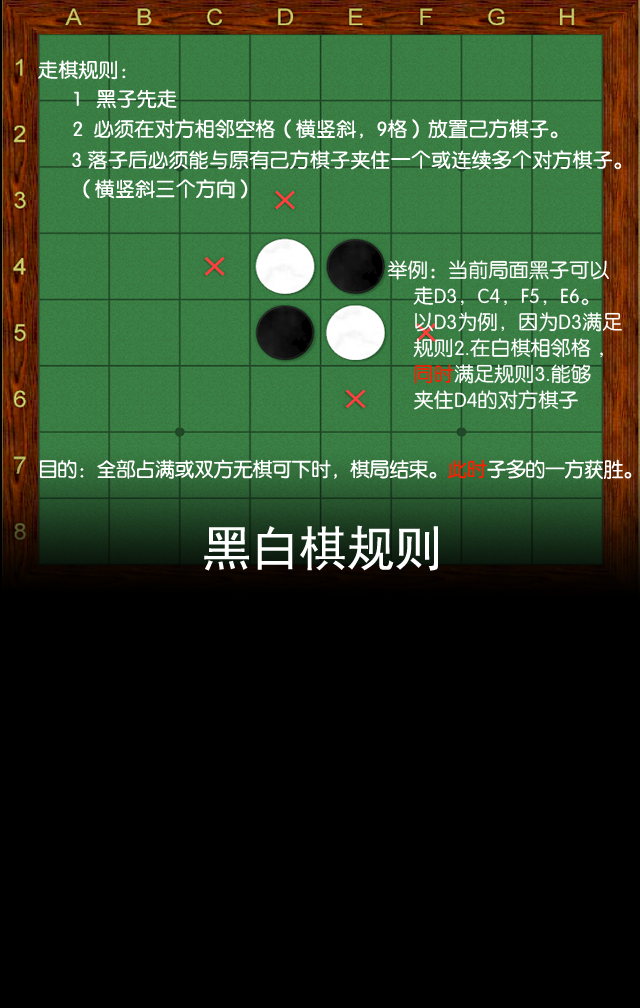
<style>
.page{position:relative;width:640px;height:1008px;background:#000000}
.page>*{position:absolute;margin:0}
.t1{font:20px "FZY3K--GBK1-0";letter-spacing:0.01em;color:#ffffff}
.t2{font:20px/26px "FZY3K--GBK1-0";letter-spacing:0.01em;color:#ffffff}
.t3{font:20px/26px "FZY3K--GBK1-0";letter-spacing:0.01em;color:#fd1e00}
.t4{font:20px "FZY3K--GBK1-0";letter-spacing:-0.025em;color:#ffffff}
.t5{font:20px "FZY3K--GBK1-0";letter-spacing:-0.025em;color:#fd1e00}
.t6{font:48px "SimHei";color:#ffffff}
</style>
<div class="page">
<p class="t1" style="left:38px;top:60px;width:88px;height:20px">走棋规则：</p>
<p class="t1" style="left:74px;top:89px;width:103px;height:20px">1   黑子先走</p>
<p class="t1" style="left:73px;top:119px;width:485px;height:20px">2  必须在对方相邻空格（横竖斜，9格）放置己方棋子。</p>
<p class="t1" style="left:72px;top:150px;width:550px;height:20px">3 落子后必须能与原有己方棋子夹住一个或连续多个对方棋子。</p>
<p class="t1" style="left:83px;top:179px;width:165px;height:20px">（横竖斜三个方向）</p>
<p class="t2" style="left:387px;top:260px;width:235px;height:150px">举例：当前局面黑子可以<br>     走D3，C4，F5，E6。<br>     以D3为例，因为D3满足<br>     规则2.在白棋相邻格 ，<br><span class="t3">     同时</span>满足规则3.能够<br>     夹住D4的对方棋子</p>
<p class="t4" style="left:39px;top:459px;width:593px;height:20px">目的：全部占满或双方无棋可下时，棋局结束。<span class="t5">此时</span>子多的一方获胜。</p>
<p class="t6" style="left:204px;top:525px;width:234px;height:46px">黑白棋规则</p>
</div>
